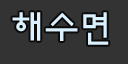
<style>
.page{position:relative;width:128px;height:64px;background:#333333}
.page>*{position:absolute;margin:0}
.t1{font:37.3px "HYnamB";letter-spacing:-0.1em;color:#dcf1ff}
</style>
<div class="page">
<p class="t1" style="left:12px;top:12px;width:97px;height:33px">해수면</p>
</div>
